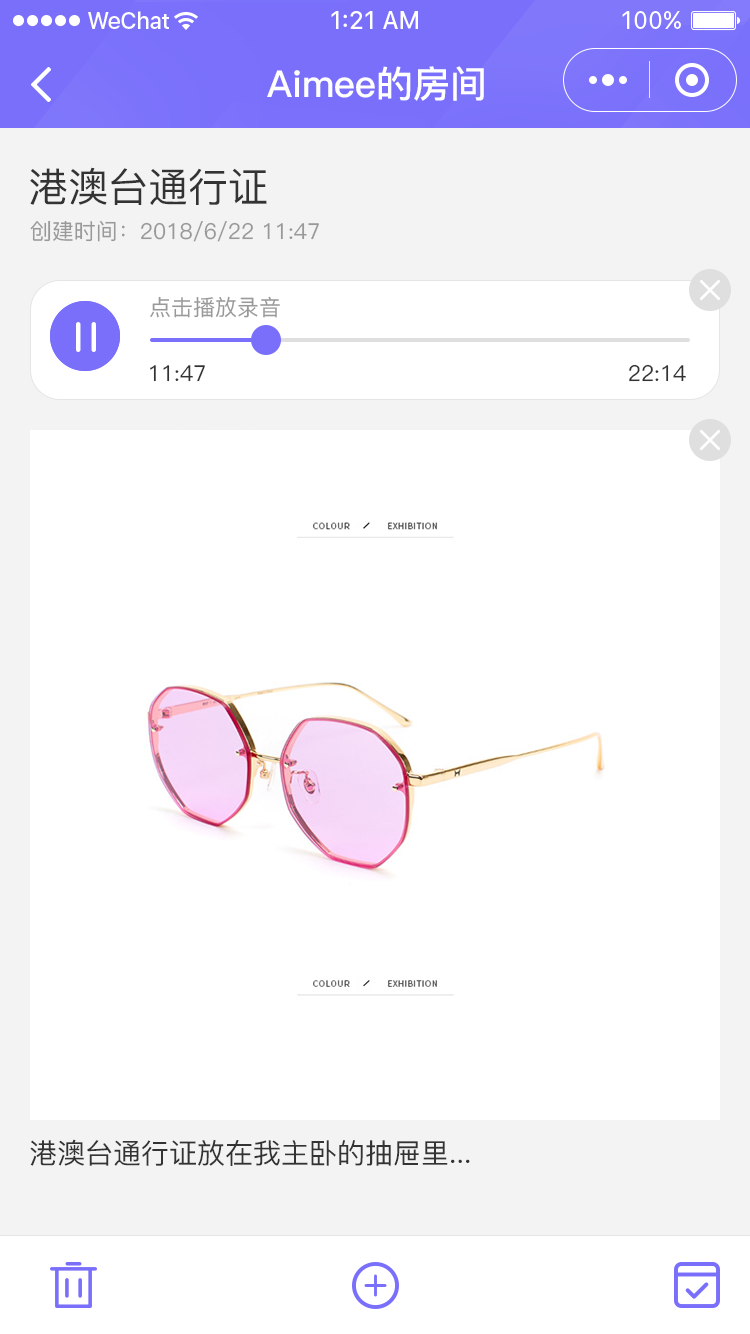
<style>
.page{position:relative;width:750px;height:1334px;background:#ffffff}
.page>*{position:absolute;margin:0}
.t1{font:37px "PingFang-SC-Bold";color:#ffffff}
.t2{font:40px "PingFang-SC-Medium";color:#333333}
.t3{font:22px "PingFang-SC-Medium";color:#999999}
.t4{font:22px "PingFang-SC-Medium";color:#333333}
.t5{font:28px "PingFang-SC-Medium";color:#333333}
</style>
<div class="page">
<p class="t1" style="left:267px;top:66px;width:217px;height:35px">Aimee的房间</p>
<p class="t2" style="left:30px;top:167px;width:237px;height:38px">港澳台通行证</p>
<p class="t3" style="left:30px;top:220px;width:289px;height:22px">创建时间：2018/6/22 11:47</p>
<p class="t3" style="left:150px;top:296px;width:130px;height:22px">点击播放录音</p>
<p class="t4" style="left:150px;top:365px;width:55px;height:17px">11:47</p>
<p class="t4" style="left:629px;top:364px;width:57px;height:18px">22:14</p>
<p class="t5" style="left:30px;top:1139px;width:440px;height:27px">港澳台通行证放在我主卧的抽屉里...</p>
</div>
